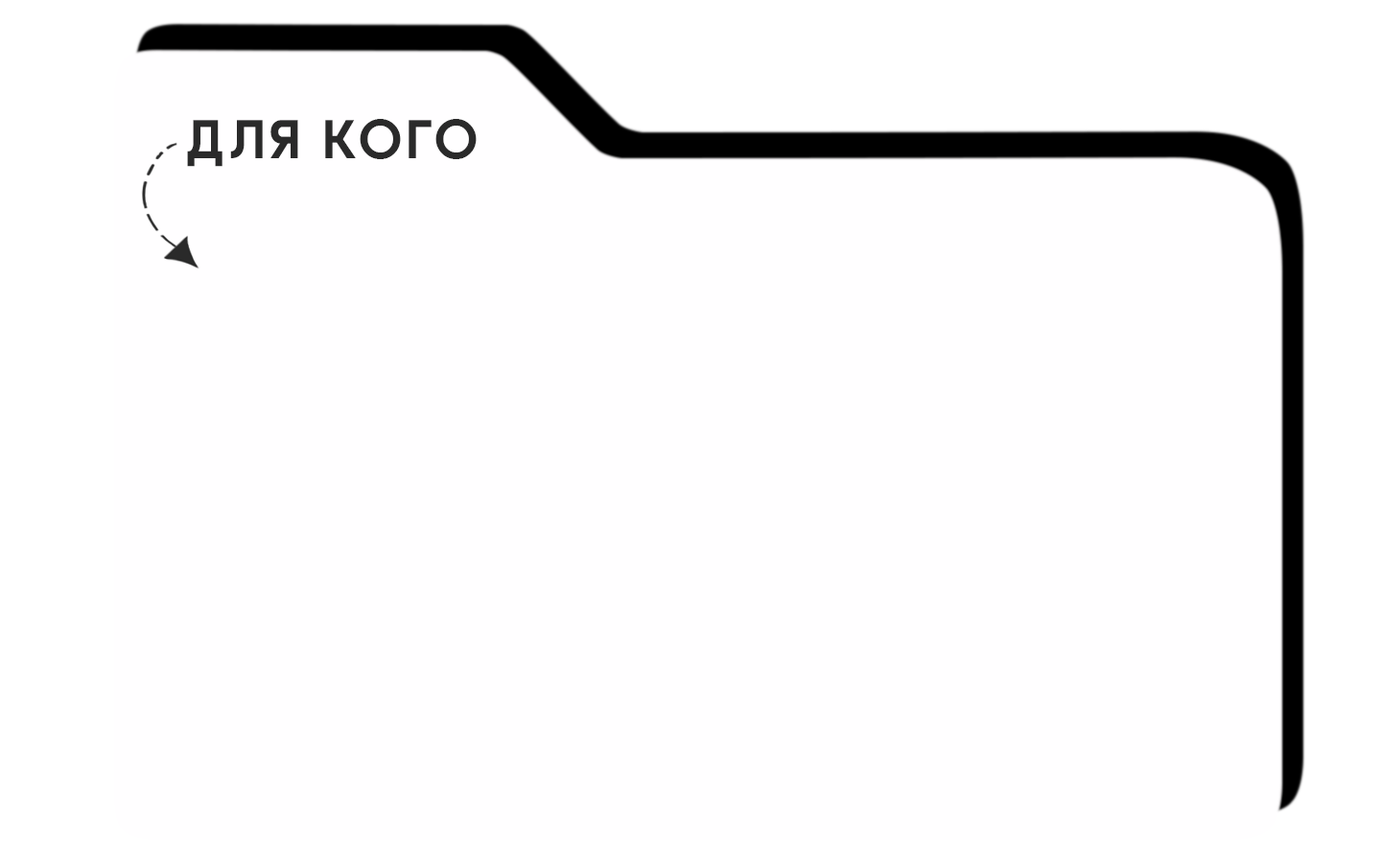
<style>
.page{position:relative;width:1381px;height:863px;background:#fffeff}
.page>*{position:absolute;margin:0}
.t1{font:53.7px "Bahnschrift-Bold";letter-spacing:0.04em;color:#2a2a2a;text-transform:uppercase}
.t2{font:53.7px "CenturyGothic-Bold";letter-spacing:0.04em;color:#2a2a2a;text-transform:uppercase}
</style>
<div class="page">
<p class="t1" style="left:187px;top:119px;width:290px;height:48px">ДЛЯ К<span class="t2">О</span>Г<span class="t2">О</span></p>
</div>
